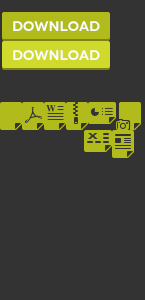
<style>
.page{position:relative;width:145px;height:300px;background:#333333}
.page>*{position:absolute;margin:0}
.t1{font:14px "Novecentowide-DemiBold";color:#fafcfe}
</style>
<div class="page">
<p class="t1" style="left:13px;top:21px;width:87px;height:10px">Download</p>
<p class="t1" style="left:13px;top:50px;width:87px;height:10px">Download</p>
</div>
